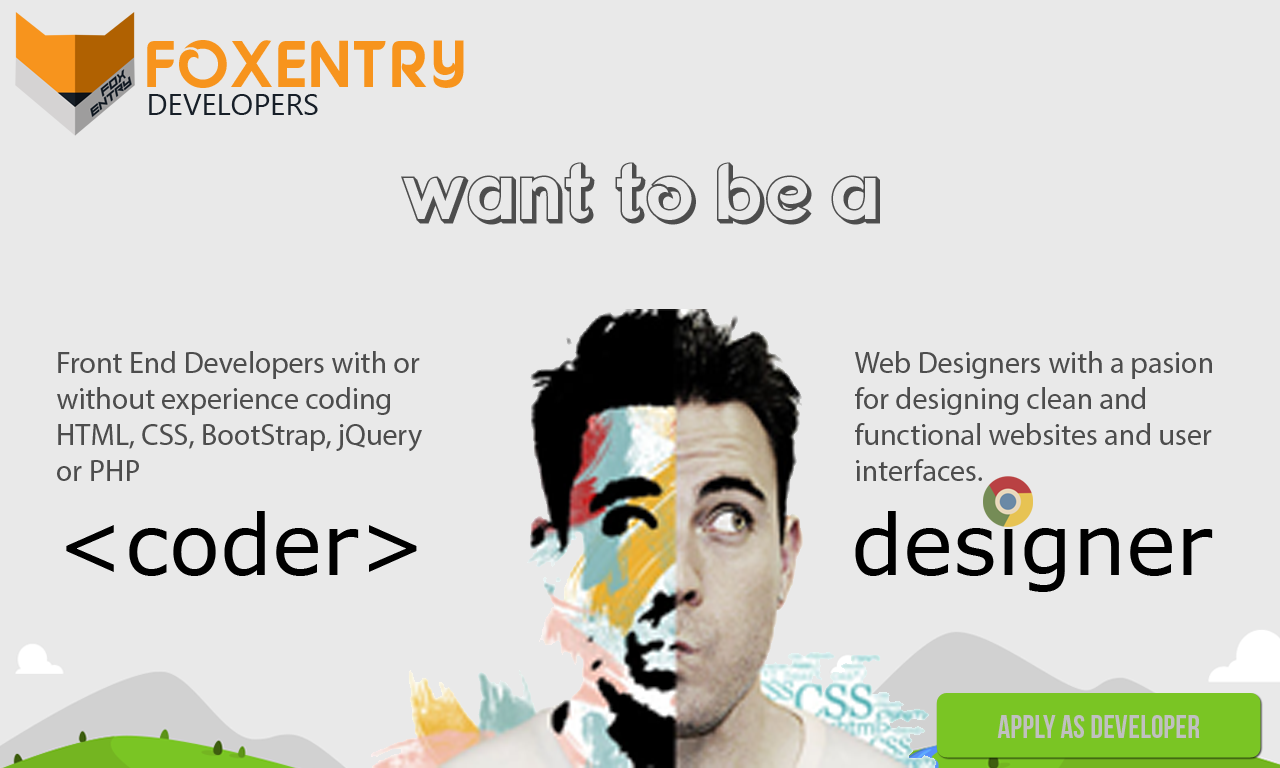
<style>
.page{position:relative;width:1280px;height:768px;background:#e9e9e9}
.page>*{position:absolute;margin:0}
.t1{font:66px "Fonarto";color:#f7941d}
.t2{font:30px "SegoeUI";color:#171f28}
.t3{font:79px "FonartoXT";color:#4d4d4d}
.t4{font:30px "MyriadPro-Regular";color:#4d4d4d}
.t5{font:84px "Verdana";color:#000000}
.t6{font:32px "BebasNeue";color:#c0c0c0}
</style>
<div class="page">
<p class="t1" style="left:147px;top:40px;width:317px;height:48px">FOXENTRY</p>
<p class="t2" style="left:149px;top:94px;width:169px;height:21px">DEVELOPERS</p>
<p class="t3" style="left:401px;top:162px;width:479px;height:63px">want to be a</p>
<p class="t4" style="left:57px;top:351px;width:365px;height:130px">Front End Developers with or without experience coding HTML, CSS, BootStrap, jQuery or PHP</p>
<p class="t4" style="left:855px;top:351px;width:357px;height:130px">Web Designers with a pasion for designing clean and <br>functional websites and user interfaces.</p>
<p class="t5" style="left:66px;top:511px;width:351px;height:65px">&lt;coder&gt;</p>
<p class="t5" style="left:855px;top:511px;width:358px;height:81px">designer</p>
<p class="t6" style="left:997px;top:715px;width:203px;height:23px">Apply as developer</p>
</div>
